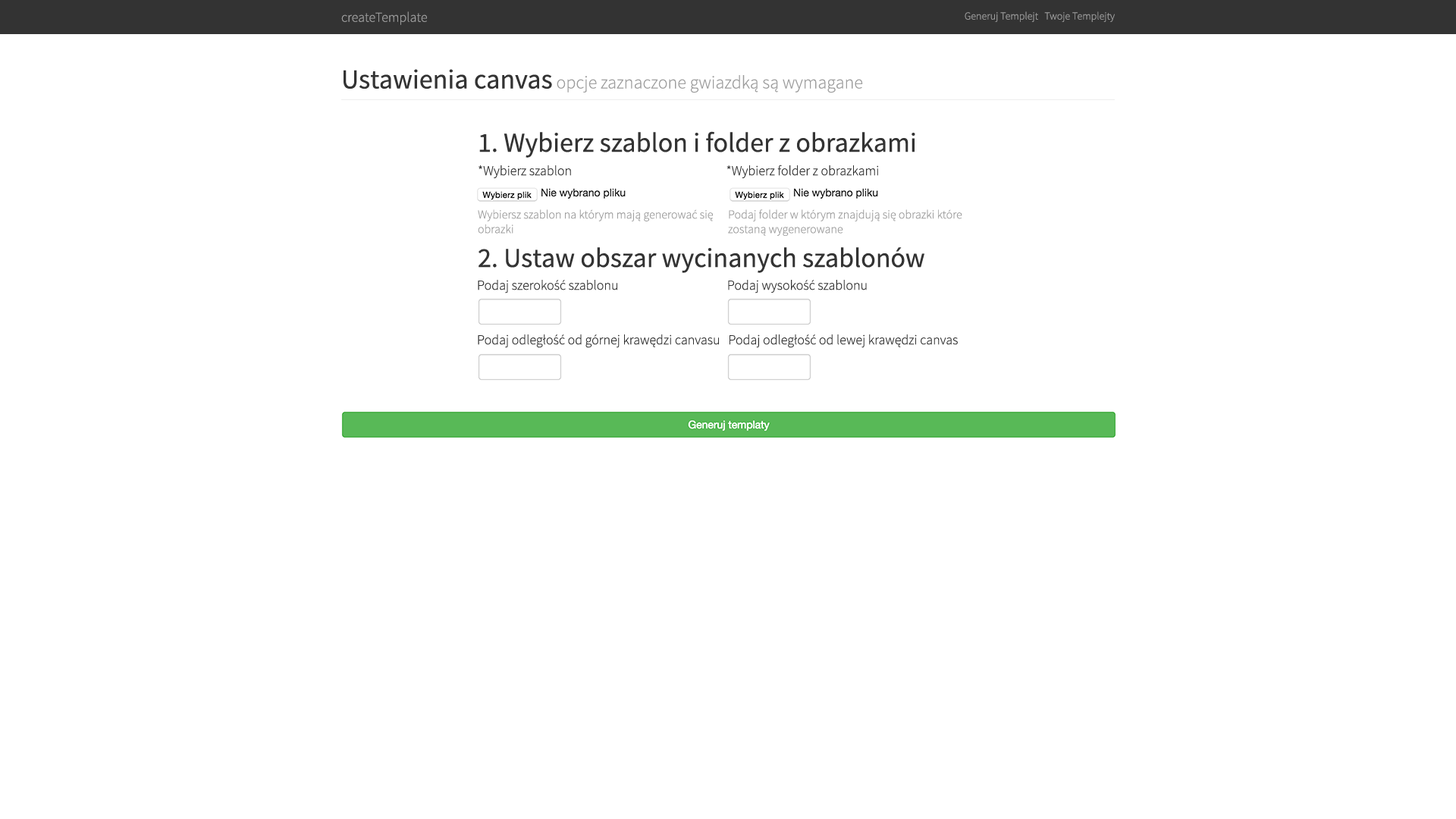
<style>
.page{position:relative;width:1456px;height:819px;background:#ffffff}
.page>*{position:absolute;margin:0}
.t1{font:13.6px "SourceSansPro-Light";color:#9d9d9d}
.t2{font:10.6px "SourceSansPro-Light";color:#9d9d9d}
.t3{font:18.2px "SourceSansPro-Light";color:#9d9d9d}
.t4{font:27.3px "SourceSansPro-Regular";color:#333333}
.t5{font:13.6px "SourceSansPro-Light";color:#333333}
.t6{font:12.1px "SourceSansPro-Light";color:#9d9d9d}
</style>
<div class="page">
<p class="t1" style="left:341px;top:11px;width:86px;height:14px">createTemplate</p>
<p class="t2" style="left:965px;top:11px;width:150px;height:11px">Generuj Templejt   Twoje Templejty</p>
<p class="t3" style="left:344px;top:69px;width:519px;height:24px"><span class="t4">Ustawienia canvas</span> opcje zaznaczone gwiazdką są wymagane</p>
<p class="t4" style="left:479px;top:131px;width:436px;height:27px">1. Wybierz szablon i folder z obrazkami</p>
<p class="t5" style="left:479px;top:165px;width:399px;height:13px">*Wybierz szablon                                      *Wybierz folder z obrazkami</p>
<p class="t6" style="left:478px;top:209px;width:235px;height:25px">Wybiersz szablon na którym mają generować się obrazki</p>
<p class="t6" style="left:728px;top:209px;width:234px;height:28px">Podaj folder w którym znajdują się obrazki które zostaną wygenerowane</p>
<p class="t4" style="left:479px;top:247px;width:445px;height:26px">2. Ustaw obszar wycinanych szablonów</p>
<p class="t5" style="left:478px;top:280px;width:389px;height:13px">Podaj szerokość szablonu                                        Podaj wysokość szablonu</p>
<p class="t5" style="left:478px;top:334px;width:480px;height:14px">Podaj odległość od górnej krawędzi canvasu   Podaj odległość od lewej krawędzi canvas</p>
</div>
